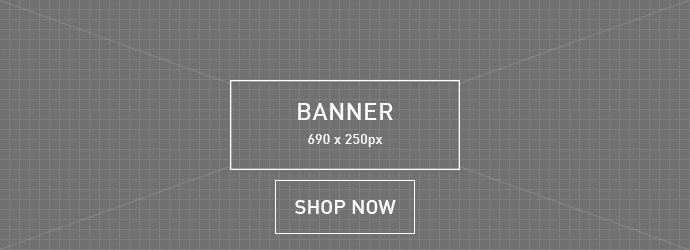
<style>
.page{position:relative;width:690px;height:250px;background:#717171}
.page>*{position:absolute;margin:0}
.t1{font:14px/24px "DIN-Medi";letter-spacing:0.015em;color:#ffffff}
.t2{font:24px/24px "DIN-Medi";letter-spacing:0.015em;color:#ffffff}
.t3{font:20px "DIN-Medi";letter-spacing:0.005em;color:#ffffff}
</style>
<div class="page">
<p class="t1" style="left:298px;top:103px;width:95px;height:44px;text-align:center"><span class="t2">BANNER<br></span>690 x 250px</p>
<p class="t3" style="left:295px;top:200px;width:101px;height:14px">SHOP NOW</p>
</div>
